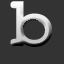
<style>
.page{position:relative;width:64px;height:64px;background:#333333}
.page>*{position:absolute;margin:0}
.t1{font:72px "FreeMonoBold"}
</style>
<div class="page">
<p class="t1" style="left:10px;top:1px;width:42px;height:46px">b</p>
</div>
